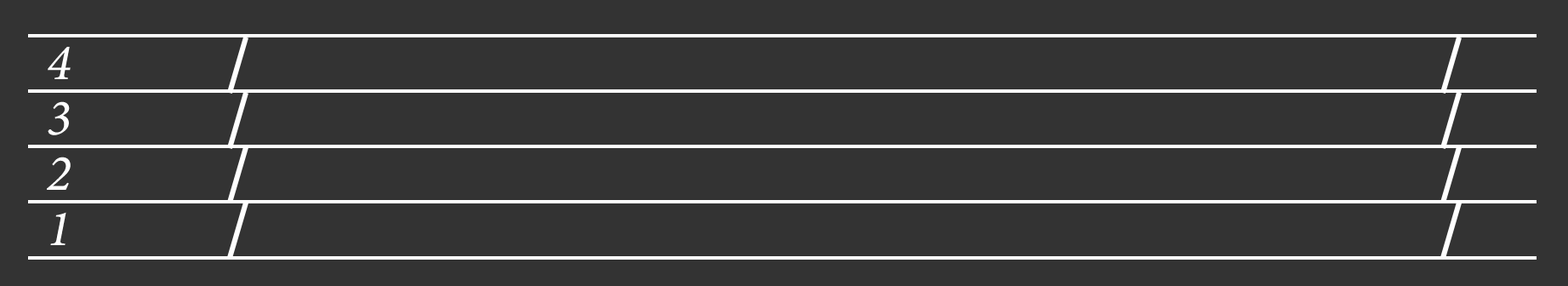
<style>
.page{position:relative;width:1568px;height:286px;background:#333333}
.page>*{position:absolute;margin:0}
.t1{font:51px "MinionPro-It";color:#ffffff}
</style>
<div class="page">
<p class="t1" style="left:48px;top:47px;width:23px;height:32px">4</p>
<p class="t1" style="left:48px;top:101px;width:22px;height:34px">3</p>
<p class="t1" style="left:47px;top:157px;width:24px;height:33px">2</p>
<p class="t1" style="left:50px;top:212px;width:16px;height:33px">1</p>
</div>
